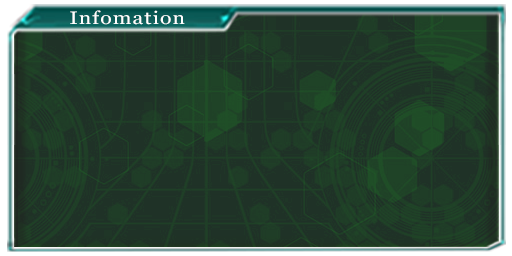
<style>
.page{position:relative;width:512px;height:256px;background:#1f3227}
.page>*{position:absolute;margin:0}
.t1{font:18.1px "Vani";letter-spacing:0.05em;color:#ffffff;scale:1.17 1}
</style>
<div class="page">
<p class="t1" style="left:70px;top:10px;width:115px;height:15px">Infomation</p>
</div>
